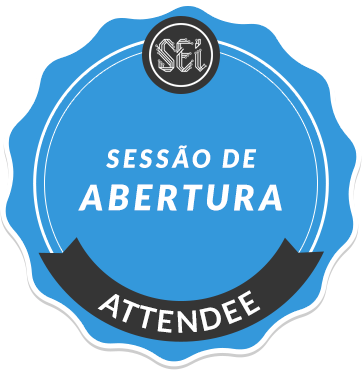
<style>
.page{position:relative;width:362px;height:375px;background:#3498db}
.page>*{position:absolute;margin:0}
.t1{font:25px "Lato-BlackItalic";letter-spacing:0.14em;color:#ffffff}
.t2{font:35px "Lato-BlackItalic";letter-spacing:0.14em;color:#ffffff}
.t3{font:29.7px "Lato-Bold";letter-spacing:0.1em;color:#ffffff}
</style>
<div class="page">
<p class="t1" style="left:106px;top:145px;width:151px;height:23px">SESSÃO DE</p>
<p class="t2" style="left:78px;top:184px;width:204px;height:27px">ABERTURA</p>
<p class="t3" style="left:97px;top:290px;width:164px;height:43px">ATTENDEE</p>
</div>
